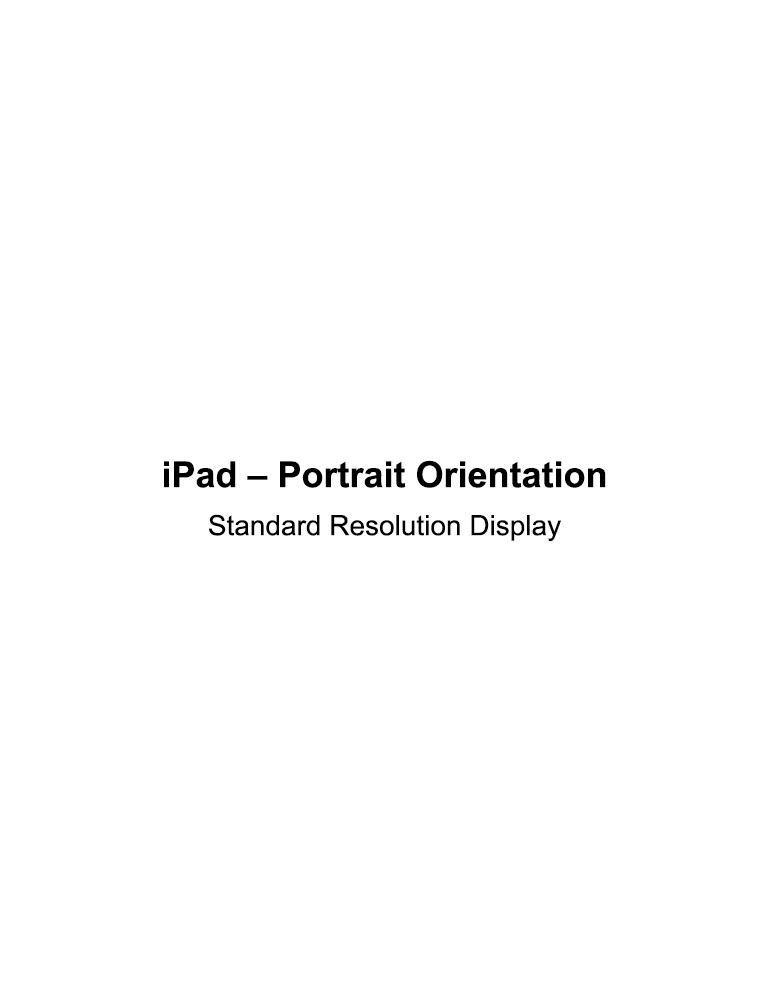
<style>
.page{position:relative;width:768px;height:1004px;background:#ffffff}
.page>*{position:absolute;margin:0}
.t1{font:36px/48px "Arial-BoldMT";color:#000000}
.t2{font:28px/48px "ArialMT";color:#000000}
</style>
<div class="page">
<p class="t1" style="left:164px;top:460px;width:442px;height:82px;text-align:center">iPad – Portrait Orientation<br><span class="t2">Standard Resolution Display</span></p>
</div>
